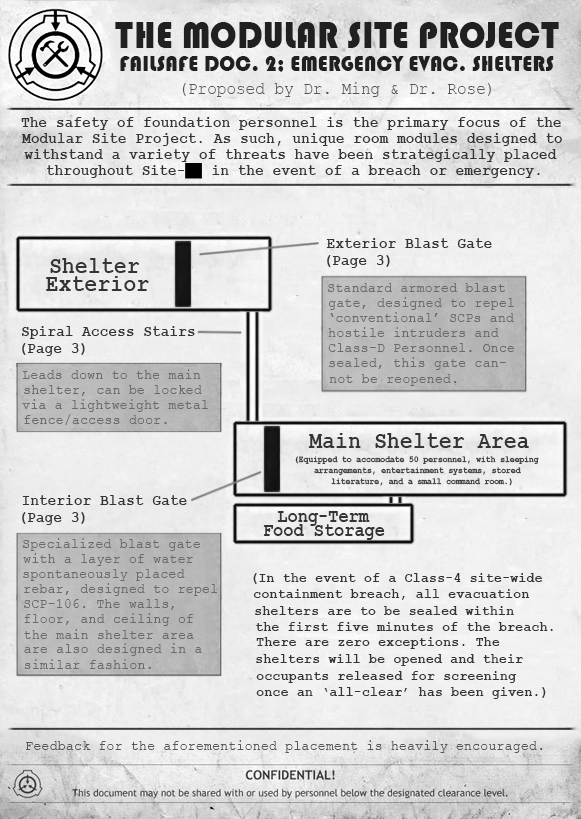
<style>
.page{position:relative;width:581px;height:819px}
.page>*{position:absolute;margin:0}
.t1{font:38.8px "Bauhaus93";letter-spacing:0.01em;color:#212020;scale:0.9 1}
.t2{font:23.2px "Bauhaus93";letter-spacing:0.01em;color:#212020;scale:0.9 1}
.t3{font:17.5px "CourierNewPSMT";letter-spacing:0.01em;color:#575757;scale:0.9 1}
.t4{font:16.3px "CourierNewPS-BoldMT";letter-spacing:0.01em;color:#343434;scale:0.88 1}
.t5{font:24.2px "CourierNewPS-BoldMT";letter-spacing:0.01em;color:#343434;scale:0.88 1}
.t6{font:14.8px "CourierNewPSMT";letter-spacing:0.01em;color:#6b6a6a;scale:0.9 1}
.t7{font:9px "CourierNewPS-BoldMT";letter-spacing:0.01em;color:#343434;scale:0.88 1}
.t8{font:19px "CourierNewPS-BoldMT";letter-spacing:0.01em;color:#343434;scale:0.88 1}
.t9{font:14.8px "CourierNewPS-BoldMT";letter-spacing:0.01em;color:#343434;scale:0.9 1}
.t10{font:14.8px "CourierNewPSMT";letter-spacing:0.01em;color:#575757;scale:0.9 1}
</style>
<div class="page">
<p class="t1" style="left:115px;top:22px;width:444px;height:26px">THE MODULAR SITE PROJECT</p>
<p class="t2" style="left:120px;top:56px;width:434px;height:16px">FAILSAFE DOC. 2; EMERGENCY EVAC. SHELTERS</p>
<p class="t3" style="left:182px;top:82px;width:309px;height:15px">(Proposed by Dr. Ming &amp; Dr. Rose)</p>
<p class="t4" style="left:21px;top:117px;width:540px;height:13px">The safety of foundation personnel is the primary focus of the</p>
<p class="t4" style="left:21px;top:133px;width:541px;height:13px">Modular Site Project. As such, unique room modules designed to</p>
<p class="t4" style="left:24px;top:149px;width:533px;height:13px">withstand a variety of threats have been strategically placed</p>
<p class="t4" style="left:47px;top:165px;width:493px;height:13px">throughout Site-35 in the event of a breach or emergency.</p>
<p class="t4" style="left:326px;top:238px;width:166px;height:10px">Exterior Blast Gate</p>
<p class="t4" style="left:327px;top:255px;width:63px;height:13px">(Page 3)</p>
<p class="t5" style="left:50px;top:258px;width:89px;height:15px">Shelter</p>
<p class="t5" style="left:46px;top:276px;width:103px;height:15px">Exterior</p>
<p class="t6" style="left:328px;top:283px;width:177px;height:9px">Standard armored blast</p>
<p class="t6" style="left:329px;top:297px;width:185px;height:13px">gate, designed to repel</p>
<p class="t6" style="left:330px;top:312px;width:184px;height:10px">‘conventional’ SCPs and</p>
<p class="t4" style="left:21px;top:326px;width:174px;height:13px">Spiral Access Stairs</p>
<p class="t6" style="left:328px;top:327px;width:171px;height:10px">hostile intruders and</p>
<p class="t4" style="left:22px;top:343px;width:63px;height:13px">(Page 3)</p>
<p class="t6" style="left:328px;top:343px;width:186px;height:9px">Class-D Personnel. Once</p>
<p class="t6" style="left:329px;top:357px;width:177px;height:13px">sealed, this gate can-</p>
<p class="t6" style="left:22px;top:369px;width:179px;height:10px">Leads down to the main</p>
<p class="t6" style="left:329px;top:374px;width:128px;height:12px">not be reopened.</p>
<p class="t6" style="left:24px;top:385px;width:178px;height:11px">shelter, can be locked</p>
<p class="t6" style="left:22px;top:399px;width:186px;height:13px">via a lightweight metal</p>
<p class="t6" style="left:24px;top:414px;width:143px;height:11px">fence/access door.</p>
<p class="t5" style="left:308px;top:433px;width:221px;height:15px">Main Shelter Area</p>
<p class="t7" style="left:295px;top:456px;width:244px;height:8px">(Equipped to accomodate 50 personnel, with sleeping</p>
<p class="t7" style="left:314px;top:467px;width:207px;height:8px">arrangements, entertainment systems, stored</p>
<p class="t7" style="left:331px;top:478px;width:181px;height:8px">literature, and a small command room.)</p>
<p class="t4" style="left:22px;top:495px;width:165px;height:10px">Interior Blast Gate</p>
<p class="t4" style="left:22px;top:512px;width:63px;height:13px">(Page 3)</p>
<p class="t8" style="left:277px;top:511px;width:93px;height:15px">Long-Term</p>
<p class="t8" style="left:263px;top:524px;width:122px;height:16px">Food Storage</p>
<p class="t6" style="left:23px;top:538px;width:177px;height:13px">Specialized blast gate</p>
<p class="t6" style="left:23px;top:553px;width:170px;height:13px">with a layer of water</p>
<p class="t6" style="left:23px;top:569px;width:162px;height:12px">spontaneously placed</p>
<p class="t9" style="left:253px;top:573px;width:289px;height:11px">(In the event of a Class-4 site-wide</p>
<p class="t6" style="left:24px;top:583px;width:193px;height:13px">rebar, designed to repel</p>
<p class="t9" style="left:253px;top:589px;width:277px;height:11px">containment breach, all evacuation</p>
<p class="t6" style="left:24px;top:599px;width:151px;height:11px">SCP-106. The walls,</p>
<p class="t9" style="left:255px;top:606px;width:259px;height:9px">shelters are to be sealed within</p>
<p class="t6" style="left:24px;top:613px;width:170px;height:13px">floor, and ceiling of</p>
<p class="t6" style="left:24px;top:629px;width:170px;height:10px">the main shelter area</p>
<p class="t9" style="left:256px;top:622px;width:297px;height:9px">the first five minutes of the breach.</p>
<p class="t9" style="left:256px;top:637px;width:244px;height:12px">There are zero exceptions. The</p>
<p class="t6" style="left:24px;top:643px;width:178px;height:13px">are also designed in a</p>
<p class="t9" style="left:256px;top:654px;width:267px;height:12px">shelters will be opened and their</p>
<p class="t6" style="left:24px;top:659px;width:127px;height:10px">similar fashion.</p>
<p class="t9" style="left:256px;top:671px;width:261px;height:12px">occupants released for screening</p>
<p class="t9" style="left:256px;top:687px;width:290px;height:12px">once an ‘all-clear’ has been given.)</p>
<p class="t10" style="left:26px;top:740px;width:517px;height:13px">Feedback for the aforementioned placement is heavily encouraged.</p>
</div>
